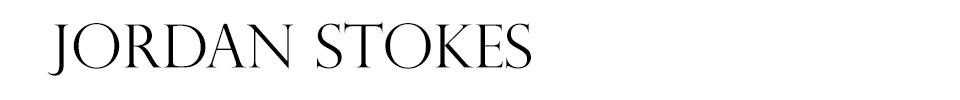
<style>
.page{position:relative;width:960px;height:100px;background:#ffffff}
.page>*{position:absolute;margin:0}
.t1{font:60px "PerpetuaTitlingMT-Light";color:#000000}
</style>
<div class="page">
<p class="t1" style="left:47px;top:22px;width:484px;height:54px">Jordan Stokes</p>
</div>
